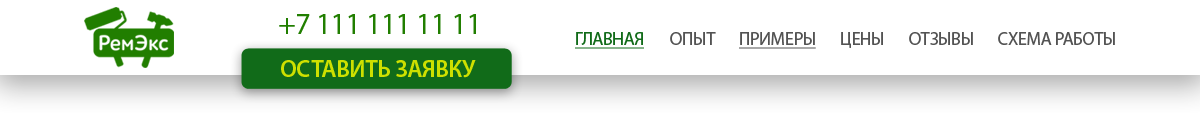
<style>
.page{position:relative;width:1200px;height:123px;background:#ffffff}
.page>*{position:absolute;margin:0}
.t1{font:30px "MyriadPro-Regular";letter-spacing:-0.02em;color:#217e00}
.t2{font:18px "MyriadPro-Regular";letter-spacing:-0.02em;color:#116b19;text-decoration:underline}
.t3{font:18px "MyriadPro-Regular";letter-spacing:-0.02em;color:#535353}
.t4{font:18px "MyriadPro-Regular";letter-spacing:-0.02em;color:#535353;text-decoration:underline}
.t5{font:24px "MyriadPro-Semibold";letter-spacing:-0.02em;color:#cee000}
</style>
<div class="page">
<p class="t1" style="left:279px;top:14px;width:197px;height:20px">+7 111 111 11 11</p>
<p class="t2" style="left:575px;top:32px;width:69px;height:17px">ГЛАВНАЯ</p>
<p class="t3" style="left:670px;top:32px;width:46px;height:13px">ОПЫТ</p>
<p class="t4" style="left:739px;top:32px;width:77px;height:17px">ПРИМЕРЫ</p>
<p class="t3" style="left:841px;top:32px;width:42px;height:16px">ЦЕНЫ</p>
<p class="t3" style="left:909px;top:32px;width:64px;height:13px">ОТЗЫВЫ</p>
<p class="t3" style="left:998px;top:32px;width:117px;height:13px">СХЕМА РАБОТЫ</p>
<p class="t5" style="left:281px;top:60px;width:195px;height:18px">ОСТАВИТЬ ЗАЯВКУ</p>
</div>
